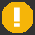
<style>
.page{position:relative;width:35px;height:35px;background:#f5b509}
.page>*{position:absolute;margin:0}
.t1{font:25px "Xirod";letter-spacing:0.11em;color:#ffffff;scale:1.17 1}
</style>
<div class="page">
<p class="t1" style="left:14px;top:7px;width:6px;height:20px">!</p>
</div>
